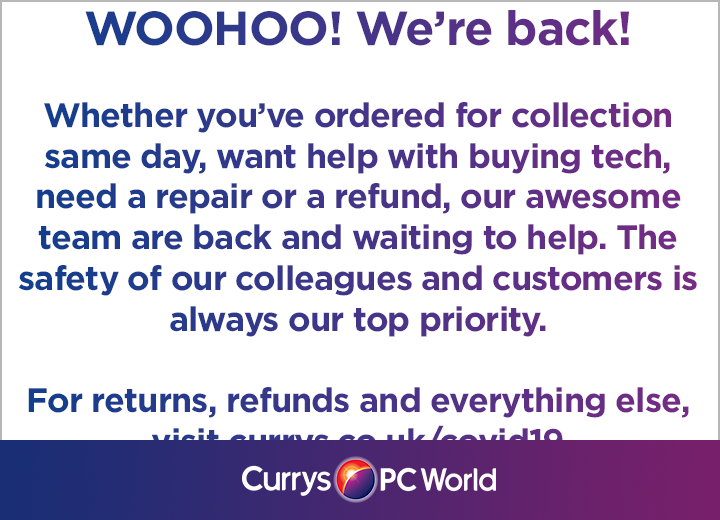
<style>
.page{position:relative;width:720px;height:520px;background:#ffffff}
.page>*{position:absolute;margin:0}
.t1{font:34px "Gotham-Bold";letter-spacing:-0.025em}
.t2{font:48px "Gotham-Bold";letter-spacing:-0.025em}
</style>
<div class="page">
<p class="t1" style="left:18px;top:10px;width:679px;height:449px;text-align:center"><span class="t2">WOOHOO! We’re back! <br></span><br>Whether you’ve ordered for collection same day, want help with buying tech, need a repair or a refund, our awesome team are back and waiting to help. The safety of our colleagues and customers is always our top priority.<br> <br>For returns, refunds and everything else, visit currys.co.uk/covid19</p>
</div>
